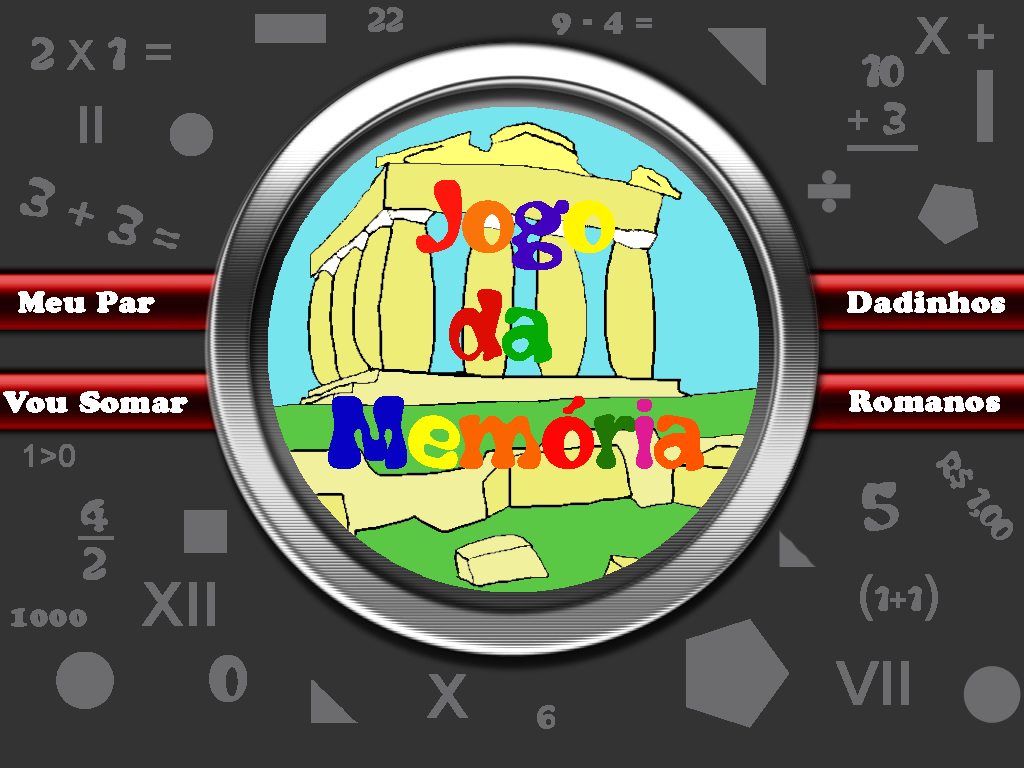
<style>
.page{position:relative;width:1024px;height:768px;background:#333333}
.page>*{position:absolute;margin:0}
.t1{font:30px "CooperBlackStd";color:#6c6b6e;font-weight:bold}
.t2{font:30px "Arial-Black";color:#6c6b6e;font-weight:bold}
.t3{font:40px "Flubber";color:#6c6b6e;font-weight:bold}
.t4{font:40px "ArialMT";color:#6c6b6e;font-weight:bold}
.t5{font:50px "ArialMT";color:#6c6b6e;font-weight:bold}
.t6{font:50px "Flubber";color:#6c6b6e;font-weight:bold}
.t7{font:50px "Flubber";color:#fbfafc;font-weight:bold}
.t8{font:90px "Flubber";color:#ff160d;font-weight:bold}
.t9{font:90px "Flubber";color:#fa7509;font-weight:bold}
.t10{font:90px "Flubber";color:#4201bf;font-weight:bold}
.t11{font:90px "Flubber";color:#fff600;font-weight:bold}
.t12{font:90px "Flubber";color:#dd0d03;font-weight:bold}
.t13{font:90px "Flubber";color:#05ab03;font-weight:bold}
.t14{font:90px "Flubber";color:#0702c3;font-weight:bold}
.t15{font:90px "Flubber";color:#fffc04;font-weight:bold}
.t16{font:90px "Flubber";color:#fb6501;font-weight:bold}
.t17{font:90px "Flubber";color:#ff0505;font-weight:bold}
.t18{font:90px "Flubber";color:#217703;font-weight:bold}
.t19{font:90px "Flubber";color:#df1b93;font-weight:bold}
.t20{font:90px "Flubber";color:#ff5400;font-weight:bold}
.t21{font:30px "CooperBlackStd";color:#fefefe;font-weight:bold}
.t22{font:30px "Flubber";color:#6c6b6e;font-weight:bold}
.t23{font:60px "ArialMT";color:#6c6b6e;font-weight:bold}
.t24{font:30px "ArialMT";color:#6c6b6e;font-weight:bold}
.t25{font:60px "Flubber";color:#6c6b6e;font-weight:bold}
</style>
<div class="page">
<p class="t1" style="left:552px;top:12px;width:100px;height:23px">9<span class="t2"> -</span> 4 =</p>
<p class="t3" style="left:31px;top:37px;width:140px;height:33px">2 <span class="t4">X</span> 1 <span class="t5">=</span></p>
<p class="t3" style="left:848px;top:54px;width:58px;height:81px;text-align:center">10<br><span class="t4">+</span> 3</p>
<p class="t5" style="left:80px;top:106px;width:22px;height:37px">II</p>
<p class="t6" style="left:20px;top:177px;width:160px;height:72px;rotate:18deg"><span class="t7">   </span>3 <span class="t5">+</span> 3 =</p>
<p class="t8" style="left:328px;top:180px;width:376px;height:291px;text-align:center">J<span class="t9">o</span><span class="t10">g</span><span class="t11">o<br></span><span class="t12">d</span><span class="t13">a <br></span><span class="t14">M</span><span class="t15">e</span><span class="t16">m</span><span class="t17">ó</span><span class="t18">r</span><span class="t19">i</span><span class="t20">a</span></p>
<p class="t21" style="left:18px;top:291px;width:137px;height:22px">Meu Par</p>
<p class="t21" style="left:847px;top:291px;width:158px;height:22px">Dadinhos</p>
<p class="t21" style="left:849px;top:390px;width:151px;height:22px">Romanos</p>
<p class="t21" style="left:3px;top:391px;width:185px;height:22px">Vou Somar</p>
<p class="t22" style="left:936px;top:451px;width:77px;height:89px;rotate:51deg">R$ 1,00</p>
<p class="t3" style="left:81px;top:499px;width:27px;height:81px;text-align:center">4<br>2</p>
<p class="t23" style="left:142px;top:582px;width:73px;height:44px">XII</p>
<p class="t5" style="left:860px;top:574px;width:78px;height:47px">(<span class="t22">1</span><span class="t24">+</span><span class="t22">1</span>)</p>
<p class="t1" style="left:11px;top:608px;width:76px;height:19px">1000</p>
<p class="t25" style="left:209px;top:655px;width:38px;height:47px">0</p>
<p class="t23" style="left:836px;top:661px;width:73px;height:44px">VII</p>
<p class="t23" style="left:427px;top:674px;width:41px;height:44px">X</p>
<p class="t22" style="left:537px;top:705px;width:18px;height:24px">6</p>
</div>
